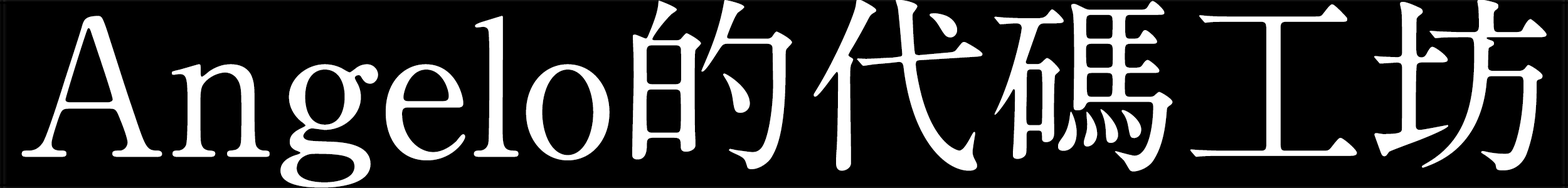
<style>
.page{position:relative;width:1568px;height:188px;background:#000000}
.page>*{position:absolute;margin:0}
.t1{font:188.2px "A1MinchoStd-Bold";color:#ffffff}
</style>
<div class="page">
<p class="t1" style="left:21px;top:0px;width:1526px;height:188px">Angelo的代碼工坊</p>
</div>
